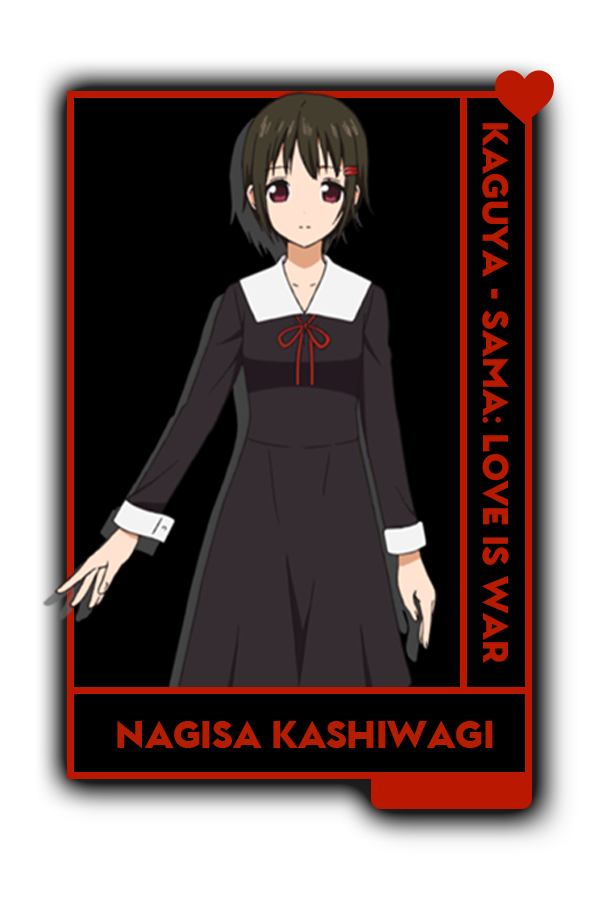
<style>
.page{position:relative;width:600px;height:900px;background:#000000}
.page>*{position:absolute;margin:0}
.t1{font:34px "GarnetCapitalsBlack-Regular";color:#b52616}
.t2{font:35.7px "GarnetCapitalsBlack-Regular";color:#b22818}
</style>
<div class="page">
<p class="t1" style="left:482px;top:123px;width:27px;height:540px;rotate:90deg">Kaguya - Sama: Love is war</p>
<p class="t2" style="left:117px;top:721px;width:376px;height:27px">naGISA kashiwagi</p>
</div>
